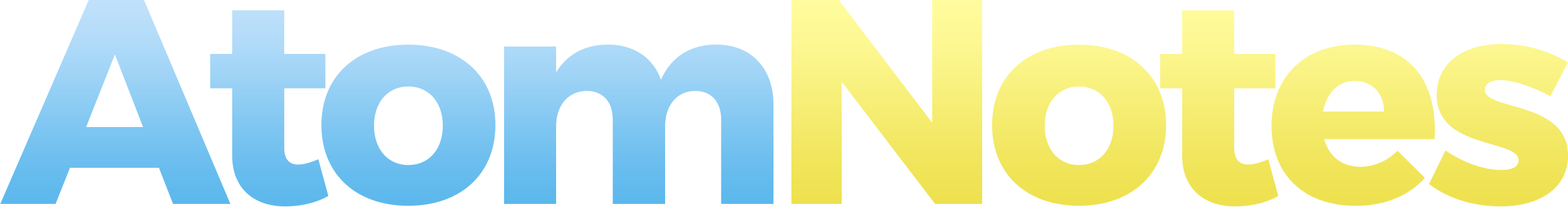
<style>
.page{position:relative;width:1568px;height:207px;background:#ffffff}
.page>*{position:absolute;margin:0}
.t1{font:290.7px "Montserrat-Bold";letter-spacing:-0.06em}
</style>
<div class="page">
<p class="t1" style="left:0px;top:0px;width:773px;height:206px">Atom</p>
<p class="t1" style="left:791px;top:0px;width:777px;height:207px">Notes</p>
</div>
